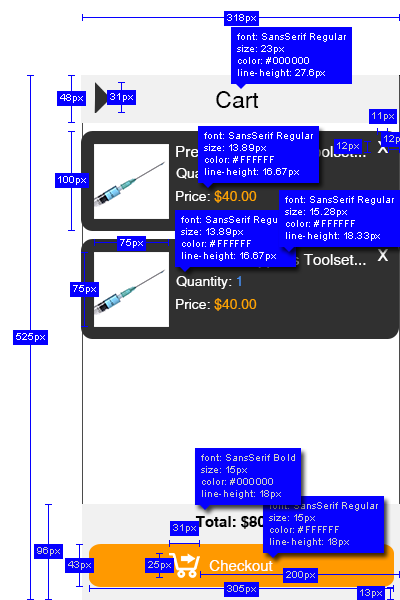
<style>
.page{position:relative;width:400px;height:600px;background:#ffffff}
.page>*{position:absolute;margin:0}
.t1{font:10px "ArialMT";color:#ffffff}
.t2{font:23px "SansSerif";color:#000000}
.t3{font:10px "ArialMT";color:#cccccc}
.t4{font:23px "SansSerif";color:#ffffff}
.t5{font:13.9px "SansSerif"}
.t6{font:13.9px "SansSerif";color:#ffffff}
.t7{font:13.9px "SansSerif";color:#ffa500}
.t8{font:15.3px "SansSerif"}
.t9{font:13.9px "SansSerif";color:#468dee}
.t10{font:15px "SansSerifBold";color:#000000}
.t11{font:15px "SansSerif";color:#ffffff}
</style>
<div class="page">
<p class="t1" style="left:227px;top:14px;width:29px;height:9px">318px</p>
<p class="t1" style="left:237px;top:33px;width:109px;height:45px">font: SansSerif Regular<br>size: 23px<br>color: #000000<br>line-height: 27.6px</p>
<p class="t1" style="left:60px;top:94px;width:23px;height:9px">48px</p>
<p class="t1" style="left:110px;top:93px;width:23px;height:9px">31px</p>
<p class="t2" style="left:216px;top:91px;width:43px;height:17px">Cart</p>
<p class="t3" style="left:372px;top:112px;width:22px;height:9px">11px</p>
<p class="t1" style="left:204px;top:132px;width:109px;height:45px">font: SansSerif Regular<br>size: 13.89px<br>color: #FFFFFF<br>line-height: 16.67px</p>
<p class="t3" style="left:337px;top:142px;width:22px;height:9px">12px</p>
<p class="t4" style="left:377px;top:141px;width:11px;height:12px">x</p>
<p class="t5" style="left:176px;top:168px;width:65px;height:13px">Quantity: 1</p>
<p class="t1" style="left:58px;top:176px;width:28px;height:9px">100px</p>
<p class="t6" style="left:176px;top:190px;width:81px;height:13px">Price: <span class="t7">$40.00</span></p>
<p class="t1" style="left:285px;top:196px;width:109px;height:45px">font: SansSerif Regular<br>size: 15.28px<br>color: #FFFFFF<br>line-height: 18.33px</p>
<p class="t1" style="left:181px;top:216px;width:109px;height:45px">font: SansSerif Regular<br>size: 13.89px<br>color: #FFFFFF<br>line-height: 16.67px</p>
<p class="t1" style="left:120px;top:239px;width:23px;height:9px">75px</p>
<p class="t8" style="left:176px;top:254px;width:190px;height:14px">Premium Tripper's Toolset...</p>
<p class="t4" style="left:377px;top:249px;width:11px;height:12px">x</p>
<p class="t6" style="left:176px;top:276px;width:65px;height:13px">Quantity: <span class="t9">1</span></p>
<p class="t1" style="left:73px;top:285px;width:23px;height:9px">75px</p>
<p class="t6" style="left:176px;top:298px;width:81px;height:13px">Price: <span class="t7">$40.00</span></p>
<p class="t1" style="left:16px;top:333px;width:29px;height:9px">525px</p>
<p class="t3" style="left:201px;top:454px;width:94px;height:45px">font: SansSerif Bold<br>size: 15px<br>color: #000000<br>line-height: 18px</p>
<p class="t3" style="left:269px;top:502px;width:109px;height:45px">font: SansSerif Regular<br>size: 15px<br>color: #FFFFFF<br>line-height: 18px</p>
<p class="t10" style="left:195px;top:516px;width:92px;height:13px">Total: $80.00</p>
<p class="t3" style="left:173px;top:524px;width:23px;height:9px">31px</p>
<p class="t3" style="left:37px;top:547px;width:23px;height:9px">96px</p>
<p class="t3" style="left:68px;top:561px;width:23px;height:9px">43px</p>
<p class="t3" style="left:148px;top:561px;width:23px;height:9px">25px</p>
<p class="t11" style="left:209px;top:560px;width:64px;height:11px">Checkout</p>
<p class="t3" style="left:286px;top:571px;width:29px;height:9px">200px</p>
<p class="t3" style="left:227px;top:585px;width:29px;height:9px">305px</p>
<p class="t3" style="left:360px;top:589px;width:22px;height:9px">13px</p>
</div>
